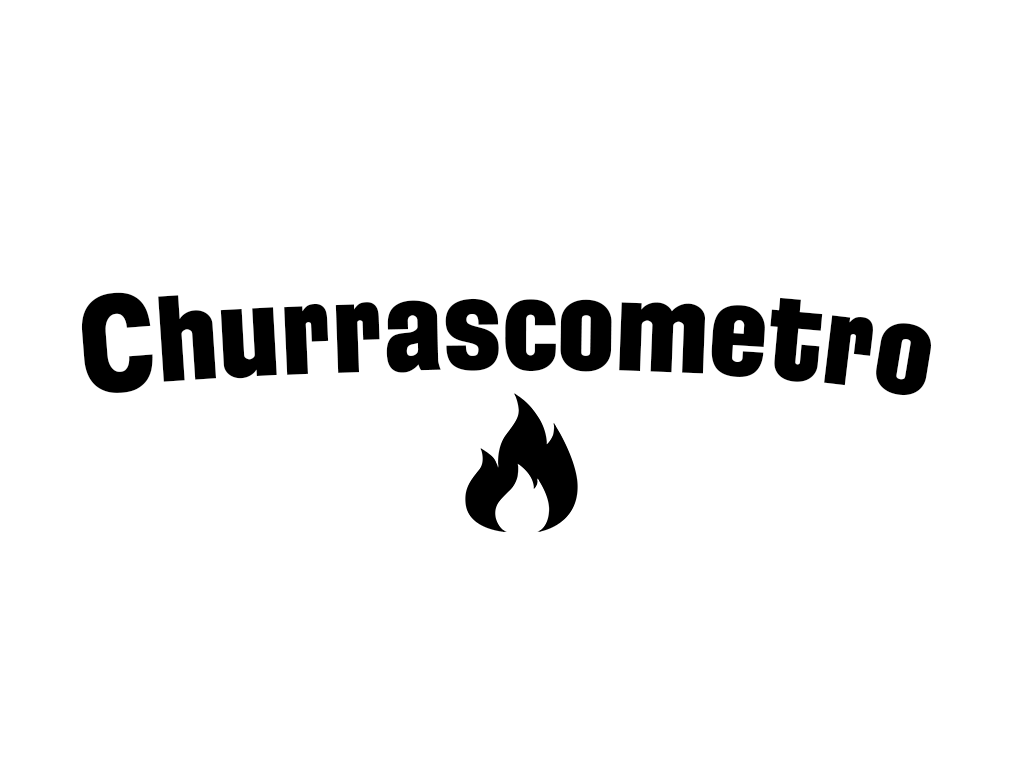
<style>
.page{position:relative;width:1024px;height:768px;background:#ffffff}
.page>*{position:absolute;margin:0}
.t1{font:130px "FloridaProject-PhaseOne";color:#000000}
</style>
<div class="page">
<p class="t1" style="left:81px;top:292px;width:850px;height:104px;rotate:-4deg">Churrascometro</p>
</div>
